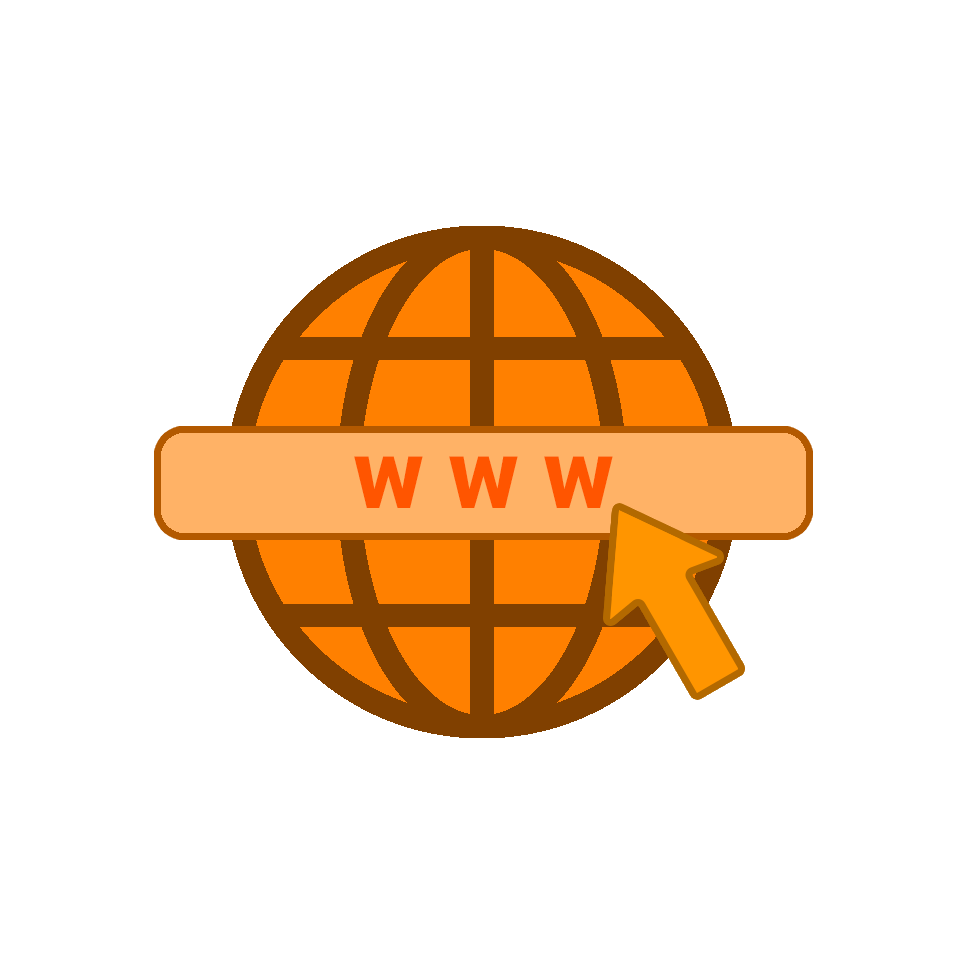
<style>
.page{position:relative;width:965px;height:965px;background:#ffffff}
.page>*{position:absolute;margin:0}
.t1{font:97.2px "Roboto-ExtraBold";color:#ff5500}
</style>
<div class="page">
<p class="t1" style="left:354px;top:456px;width:259px;height:52px">w w w</p>
</div>
